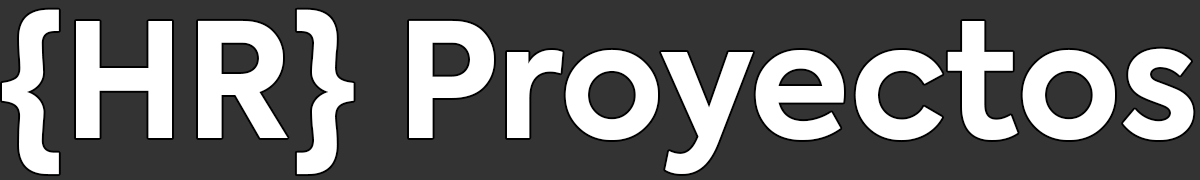
<style>
.page{position:relative;width:1200px;height:180px;background:#333333}
.page>*{position:absolute;margin:0}
.t1{font:158.3px "Axiforma-Bold";color:#ffffff}
</style>
<div class="page">
<p class="t1" style="left:2px;top:9px;width:1192px;height:166px">{HR} Proyectos</p>
</div>
